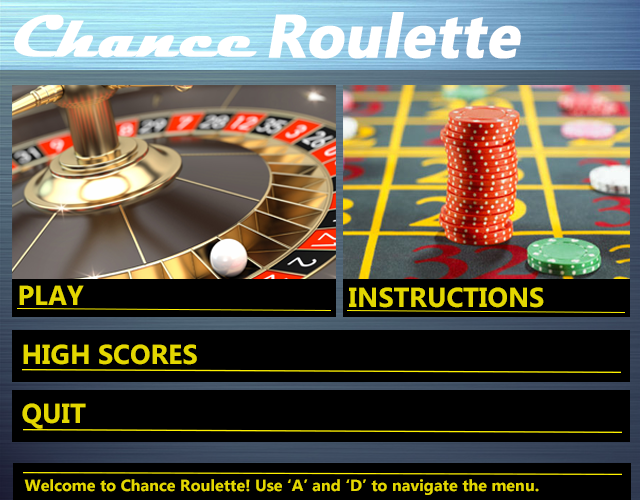
<style>
.page{position:relative;width:640px;height:500px;background:#000000}
.page>*{position:absolute;margin:0}
.t1{font:60px "Magneto-Bold";color:#ffffff;font-weight:bold;font-style:italic}
.t2{font:60.8px "MyanmarText-Bold";color:#ffffff;font-weight:bold;font-style:italic}
.t3{font:27.5px "MyanmarText-Bold";color:#e3d700}
.t4{font:16px "MyanmarText-Bold";color:#e3d700}
</style>
<div class="page">
<p class="t1" style="left:14px;top:14px;width:243px;height:44px">Chance</p>
<p class="t2" style="left:268px;top:12px;width:253px;height:47px">Roulette</p>
<p class="t3" style="left:19px;top:285px;width:65px;height:20px">PLAY</p>
<p class="t3" style="left:349px;top:287px;width:195px;height:21px">INSTRUCTIONS</p>
<p class="t3" style="left:23px;top:344px;width:174px;height:21px">HIGH SCORES</p>
<p class="t3" style="left:22px;top:403px;width:64px;height:26px">QUIT</p>
<p class="t4" style="left:24px;top:479px;width:515px;height:16px">Welcome to Chance Roulette! Use ‘A’ and ‘D’ to navigate the menu.</p>
</div>
